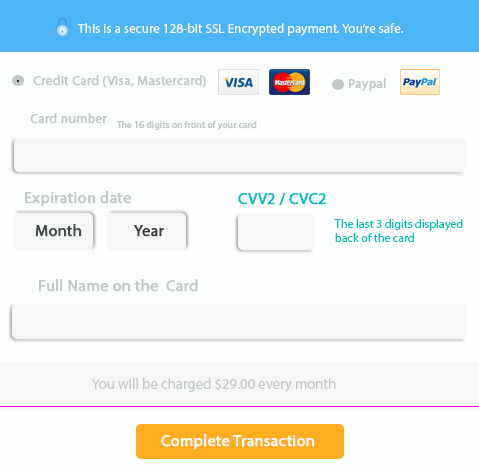
<style>
.page{position:relative;width:479px;height:472px;background:#fcfeff}
.page>*{position:absolute;margin:0}
.t1{font:13.3px "MyriadPro-Regular";color:#ffffff}
.t2{font:13.3px "MyriadPro-Regular";color:#c0c8c8;font-weight:bold}
.t3{font:16px "MyriadPro-Regular";color:#c0c8c8;font-weight:bold}
.t4{font:12px "MyriadPro-Regular";color:#c0c8c8;font-weight:bold}
.t5{font:12px "MyriadPro-Regular";color:#04bebe;font-weight:bold}
.t6{font:12px "MyriadPro-Regular";color:#04bebe}
.t7{font:12px "MyriadPro-Regular";color:#2f3333;font-weight:bold}
.t8{font:12px "MyriadPro-Regular";color:#3b3c3c;font-weight:bold}
.t9{font:14.7px "MyriadPro-Regular";color:#c0c8c8}
.t10{font:12px "MyriadPro-Regular";color:#f7fbfb;font-weight:bold}
</style>
<div class="page">
<p class="t1" style="left:77px;top:23px;width:326px;height:13px">This is a secure 128-bit SSL Encrypted payment. You’re safe.</p>
<p class="t2" style="left:33px;top:75px;width:173px;height:13px">Credit Card (Visa, Mastercard)</p>
<p class="t2" style="left:349px;top:78px;width:37px;height:14px">Paypal</p>
<p class="t3" style="left:30px;top:113px;width:227px;height:18px"><span class="t2">Card number   </span>The 16 digits on front of your card</p>
<p class="t4" style="left:25px;top:191px;width:107px;height:16px">Expiration date</p>
<p class="t5" style="left:238px;top:193px;width:88px;height:13px">CVV2 / CVC2</p>
<p class="t6" style="left:334px;top:219px;width:129px;height:23px">The last 3 digits displayed back of the card</p>
<p class="t7" style="left:35px;top:224px;width:47px;height:13px">Month</p>
<p class="t8" style="left:134px;top:225px;width:30px;height:12px">Year</p>
<p class="t3" style="left:39px;top:279px;width:159px;height:13px">Full Name on the  Card</p>
<p class="t9" style="left:92px;top:378px;width:244px;height:14px">You will be charged $29.00 every month</p>
<p class="t10" style="left:161px;top:434px;width:154px;height:16px">Complete Transaction</p>
</div>
